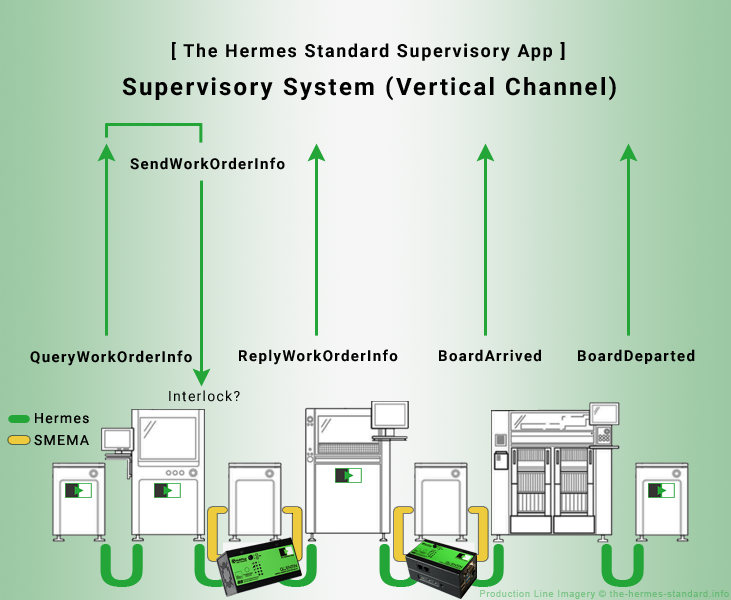
<style>
.page{position:relative;width:731px;height:600px}
.page>*{position:absolute;margin:0}
.t1{font:18px "Roboto-Bold";letter-spacing:0.09em;color:#010101}
.t2{font:24px "Roboto-Bold";letter-spacing:0.09em;color:#010101}
.t3{font:15px "Roboto-Bold";letter-spacing:0.09em;color:#010101}
.t4{font:14px "Roboto-Regular";letter-spacing:0.09em;color:#010101}
.t5{font:72px "ArialRoundedMTBold";letter-spacing:0.09em;color:#23a538}
.t6{font:72px "ArialRoundedMTBold";letter-spacing:0.09em;color:#eeca3d}
.t7{font:60px "ArialRoundedMTBold";letter-spacing:0.1em;color:#eeca3d;scale:1.17 1}
.t8{font:60px "ArialRoundedMTBold";letter-spacing:0.1em;color:#23a538;scale:1.17 1}
.t9{font:60px "ArialRoundedMTBold";letter-spacing:0.1em;scale:1.17 1}
.t10{font:9px "ArialMT";letter-spacing:0.09em;color:#70be7d}
</style>
<div class="page">
<p class="t1" style="left:172px;top:42px;width:393px;height:19px">[ The Hermes Standard Supervisory App ]</p>
<p class="t2" style="left:122px;top:76px;width:494px;height:25px">Supervisory System (Vertical Channel)</p>
<p class="t3" style="left:130px;top:157px;width:155px;height:13px">SendWorkOrderInfo</p>
<p class="t3" style="left:30px;top:350px;width:162px;height:16px">QueryWorkOrderInfo</p>
<p class="t3" style="left:239px;top:349px;width:159px;height:16px">ReplyWorkOrderInfo</p>
<p class="t3" style="left:439px;top:349px;width:102px;height:13px">BoardArrived</p>
<p class="t3" style="left:578px;top:349px;width:117px;height:15px">BoardDeparted</p>
<p class="t4" style="left:169px;top:390px;width:71px;height:12px">Interlock?</p>
<p class="t4" style="left:35px;top:413px;width:54px;height:11px">Hermes</p>
<p class="t5" style="left:8px;top:415px;width:22px;height:8px">-</p>
<p class="t6" style="left:8px;top:436px;width:22px;height:8px">-</p>
<p class="t4" style="left:34px;top:434px;width:55px;height:12px">SMEMA</p>
<p class="t7" style="left:208px;top:507px;width:19px;height:54px">[</p>
<p class="t7" style="left:282px;top:507px;width:20px;height:54px">]</p>
<p class="t7" style="left:394px;top:507px;width:19px;height:54px">[</p>
<p class="t7" style="left:468px;top:507px;width:20px;height:54px">]</p>
<p class="t8" style="left:100px;top:544px;width:43px;height:43px">U</p>
<p class="t9" style="left:194px;top:544px;width:43px;height:43px">U</p>
<p class="t9" style="left:274px;top:544px;width:43px;height:43px">U</p>
<p class="t8" style="left:379px;top:544px;width:43px;height:43px">U</p>
<p class="t9" style="left:461px;top:544px;width:43px;height:43px">U</p>
<p class="t8" style="left:601px;top:544px;width:43px;height:43px">U</p>
<p class="t10" style="left:480px;top:590px;width:249px;height:9px">Production Line Imagery © the-hermes-standard.info</p>
</div>
